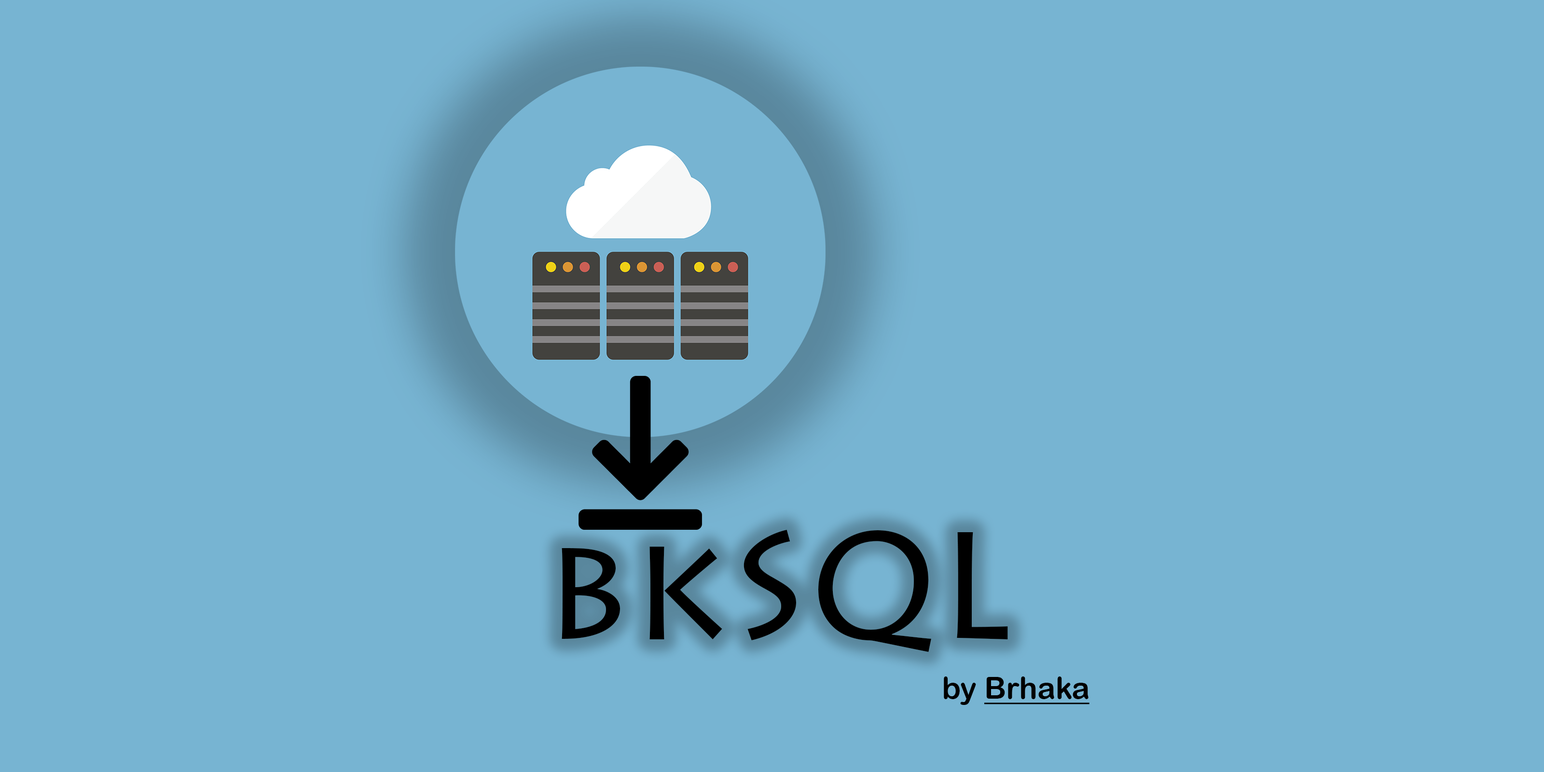
<style>
.page{position:relative;width:1544px;height:772px;background:#77b4d2}
.page>*{position:absolute;margin:0}
.t1{font:150.8px "LithosPro-Regular";color:#000000}
.t2{font:30.2px "ArialRoundedMTBold";color:#000000;text-decoration:underline}
.t3{font:30.2px "ArialRoundedMTBold";color:#000000}
</style>
<div class="page">
<p class="t1" style="left:562px;top:530px;width:446px;height:122px">bkSQL</p>
<p class="t2" style="left:944px;top:677px;width:146px;height:28px"><span class="t3">by </span>Brhaka</p>
</div>
